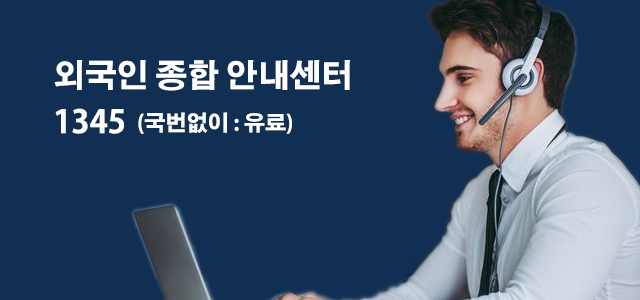
<style>
.page{position:relative;width:640px;height:300px;background:#102f52}
.page>*{position:absolute;margin:0}
.t1{font:31.8px "AdobeGothicStd-Bold";color:#ffffff}
.t2{font:21.2px "AdobeGothicStd-Bold";color:#ffffff}
</style>
<div class="page">
<p class="t1" style="left:54px;top:60px;width:297px;height:31px">외국인 종합 안내센터</p>
<p class="t1" style="left:55px;top:108px;width:69px;height:26px">1345</p>
<p class="t2" style="left:138px;top:112px;width:154px;height:22px">(국번없이 : 유료)</p>
</div>
